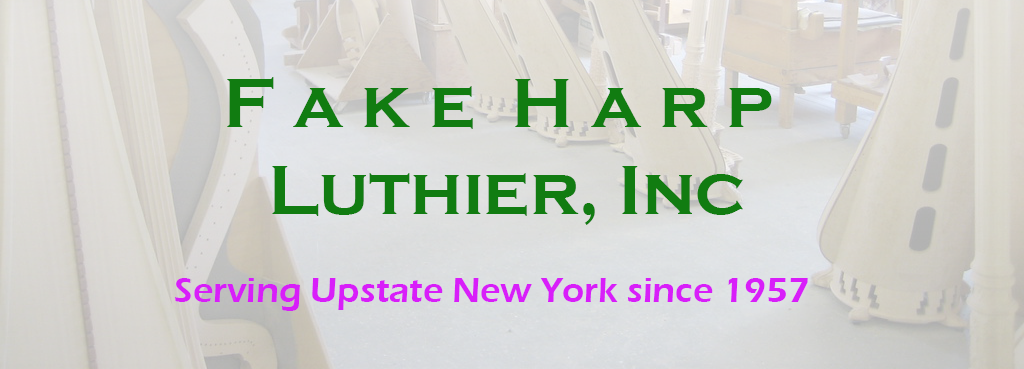
<style>
.page{position:relative;width:1024px;height:369px}
.page>*{position:absolute;margin:0}
.t1{font:72px "CopperplateGothic-Bold";color:#117c11}
.t2{font:36px "ErasITC-Demi";color:#d81ef9}
</style>
<div class="page">
<p class="t1" style="left:227px;top:77px;width:545px;height:148px;text-align:center">F a k e  H a r p <br>Luthier, Inc</p>
<p class="t2" style="left:175px;top:278px;width:633px;height:33px">Serving Upstate New York since 1957</p>
</div>
